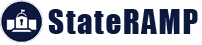
<style>
.page{position:relative;width:202px;height:45px;background:#ffffff}
.page>*{position:absolute;margin:0}
.t1{font:31.2px "Impact";letter-spacing:0.05em;color:#0d183f}
</style>
<div class="page">
<p class="t1" style="left:48px;top:9px;width:150px;height:25px">StateRAMP</p>
</div>
